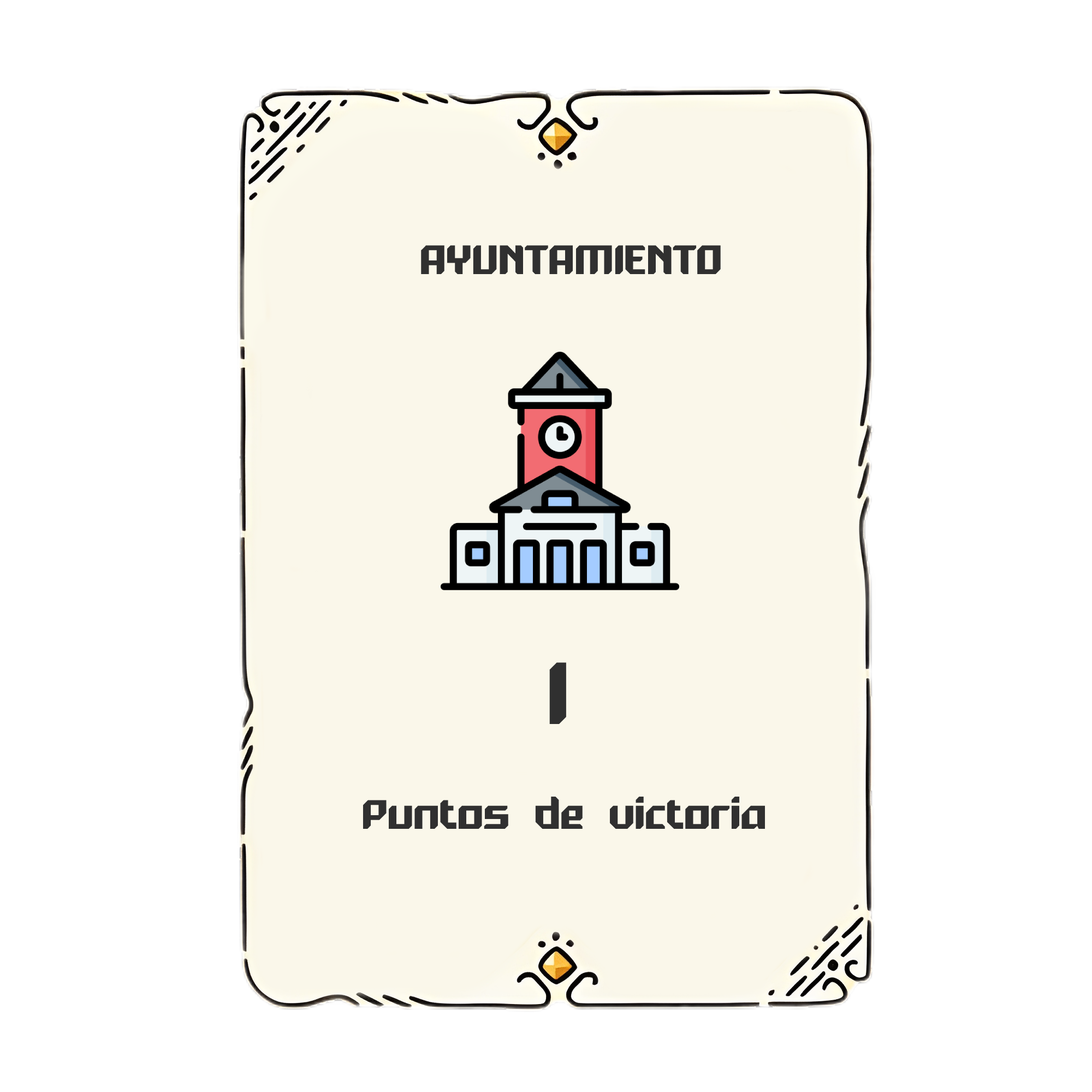
<style>
.page{position:relative;width:1092px;height:1092px;background:#ffffff}
.page>*{position:absolute;margin:0}
.t1{font:38.2px "Arcadia-Regular";color:#303030}
.t2{font:81.9px "Arcadia-Regular";color:#303030}
</style>
<div class="page">
<p class="t1" style="left:421px;top:245px;width:300px;height:29px">AYUNTAMIENTO</p>
<p class="t2" style="left:549px;top:662px;width:17px;height:62px">1</p>
<p class="t1" style="left:363px;top:796px;width:402px;height:33px">Puntos de victoria</p>
</div>
